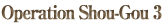
<style>
.page{position:relative;width:165px;height:26px;background:#ffffff}
.page>*{position:absolute;margin:0}
.t1{font:19px "RyuminPro-ExBold";letter-spacing:-0.08em;color:#69553d;font-weight:bold;scale:0.9 1}
</style>
<div class="page">
<p class="t1" style="left:1px;top:5px;width:161px;height:18px">Operation Shou-Gou 3</p>
</div>
